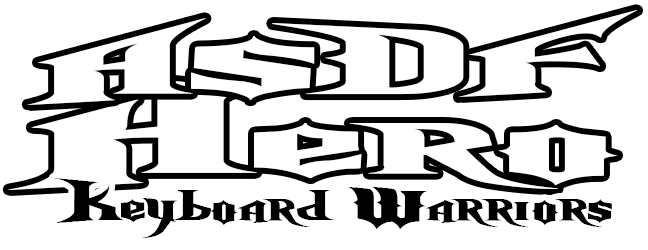
<style>
.page{position:relative;width:648px;height:250px;background:#ffffff}
.page>*{position:absolute;margin:0}
.t1{font:85.9px "NightmareHero";color:#ffffff;scale:3.44 1}
.t2{font:126.3px "NightmareHero";color:#ffffff;scale:3.43 1}
.t3{font:54.3px "NightmareHero";color:#000000;scale:1.77 1}
</style>
<div class="page">
<p class="t1" style="left:27px;top:10px;width:611px;height:95px">ASDF</p>
<p class="t2" style="left:8px;top:78px;width:610px;height:112px">Hero</p>
<p class="t3" style="left:54px;top:178px;width:558px;height:60px">Keyboard Warriors</p>
</div>
